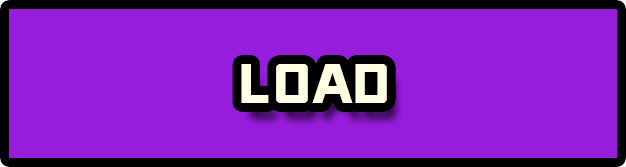
<style>
.page{position:relative;width:626px;height:167px;background:#971ddd}
.page>*{position:absolute;margin:0}
.t1{font:90px "ONRAMP";color:#ffffe3}
</style>
<div class="page">
<p class="t1" style="left:241px;top:64px;width:146px;height:39px">load</p>
</div>
